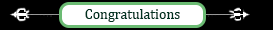
<style>
.page{position:relative;width:273px;height:30px;background:#000000}
.page>*{position:absolute;margin:0}
.t1{font:14px "Cambria";color:#013220}
</style>
<div class="page">
<p class="t1" style="left:85px;top:9px;width:95px;height:13px">Congratulations</p>
</div>
